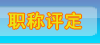
<style>
.page{position:relative;width:100px;height:45px}
.page>*{position:absolute;margin:0}
.t1{font:18px "SimHei";letter-spacing:0.04em;color:#ebe315;font-weight:bold}
</style>
<div class="page">
<p class="t1" style="left:8px;top:12px;width:74px;height:18px">职称评定</p>
</div>
